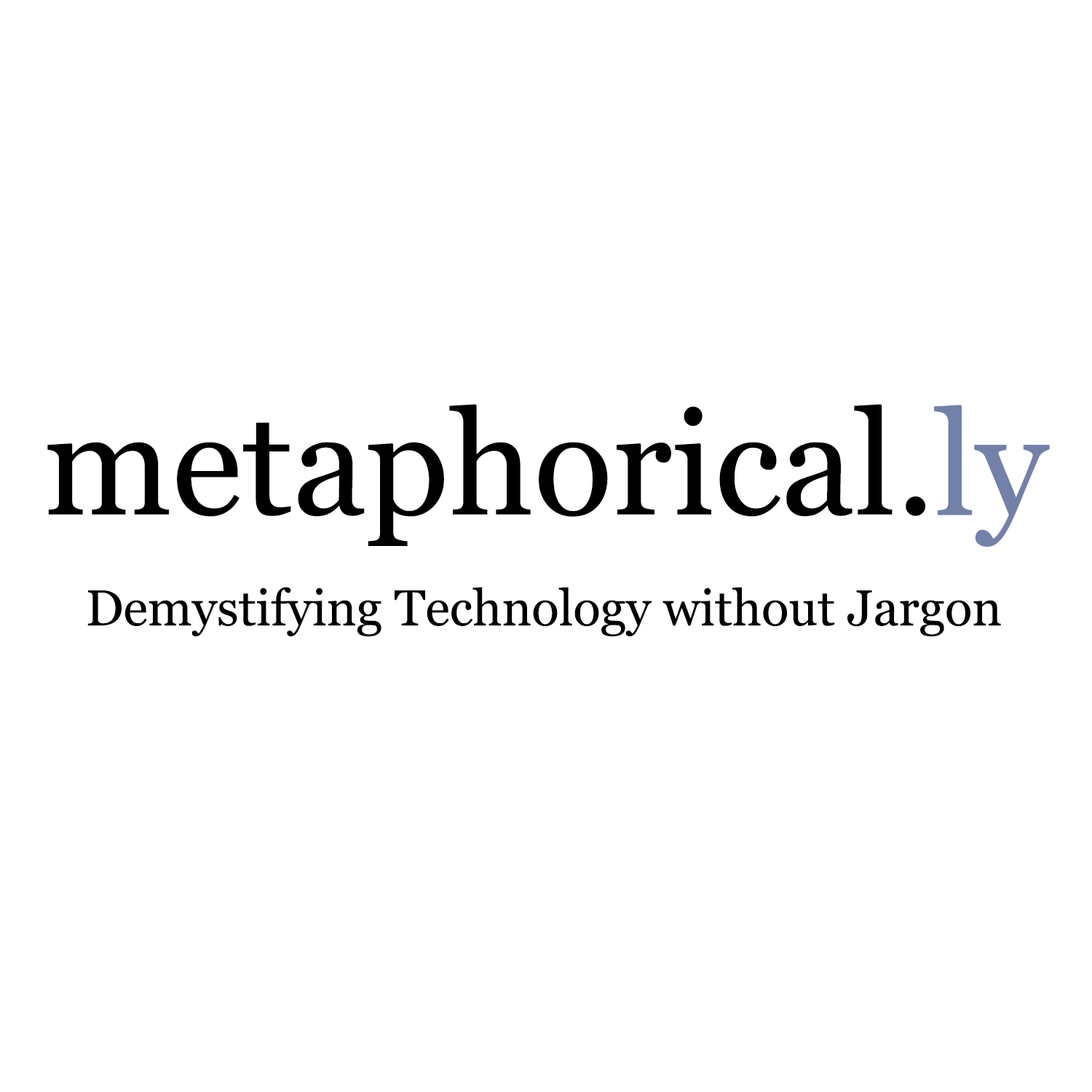
<style>
.page{position:relative;width:1092px;height:1092px;background:#ffffff}
.page>*{position:absolute;margin:0}
.t1{font:145.6px "Georgia";color:#000000}
.t2{font:145.6px "Georgia";color:#7381a9}
.t3{font:50.4px "Georgia";color:#000000}
</style>
<div class="page">
<p class="t1" style="left:47px;top:404px;width:879px;height:142px">metaphorical.</p>
<p class="t2" style="left:934px;top:405px;width:116px;height:142px">ly</p>
<p class="t3" style="left:87px;top:587px;width:914px;height:50px">Demystifying Technology without Jargon</p>
</div>
